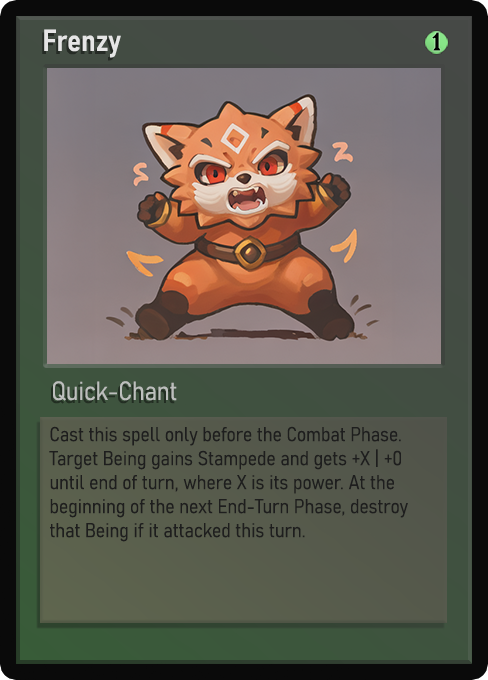
<style>
.page{position:relative;width:488px;height:680px}
.page>*{position:absolute;margin:0}
.t1{font:30px "Bahnschrift-SemiBoldSemiCondensed";color:#f2f2f2;font-weight:bold}
.t2{font:25px "WTRRoycroft";color:#000000;font-weight:bold;scale:1.09 1}
.t3{font:26px "Bahnschrift-LightSemiCondensed";color:#c8c8c8;font-weight:bold}
.t4{font:20px "Bahnschrift-LightSemiCondensed";color:#1e1e1e;font-weight:bold}
</style>
<div class="page">
<p class="t1" style="left:44px;top:29px;width:77px;height:29px;opacity:0.9">Frenzy</p>
<p class="t2" style="left:432px;top:32px;width:9px;height:19px">1</p>
<p class="t3" style="left:53px;top:381px;width:124px;height:20px;opacity:0.9">Quick-Chant</p>
<p class="t4" style="left:49px;top:426px;width:359px;height:116px">Cast this spell only before the Combat Phase. Target Being gains Stampede and gets +X | +0 until end of turn, where X is its power. At the beginning of the next End-Turn Phase, destroy that Being if it attacked this turn.</p>
</div>
